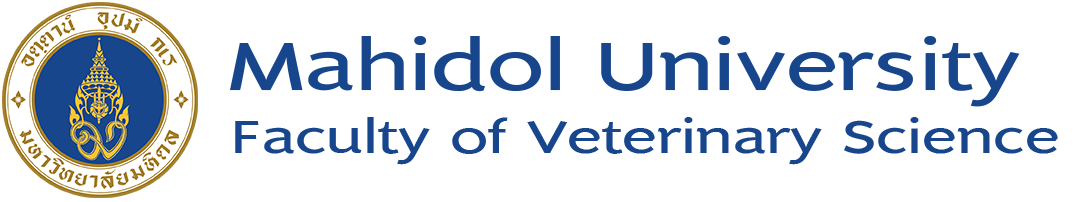
<style>
.page{position:relative;width:1080px;height:202px;background:#ffffff}
.page>*{position:absolute;margin:0}
.t1{font:86.6px "DBLimX";color:#17468c;scale:1.35 1}
.t2{font:58.2px "DBLimX";color:#17468c;scale:1.35 1}
</style>
<div class="page">
<p class="t1" style="left:230px;top:36px;width:790px;height:71px">Mahidol University</p>
<p class="t2" style="left:235px;top:117px;width:823px;height:48px">Faculty of Veterinary Science</p>
</div>
